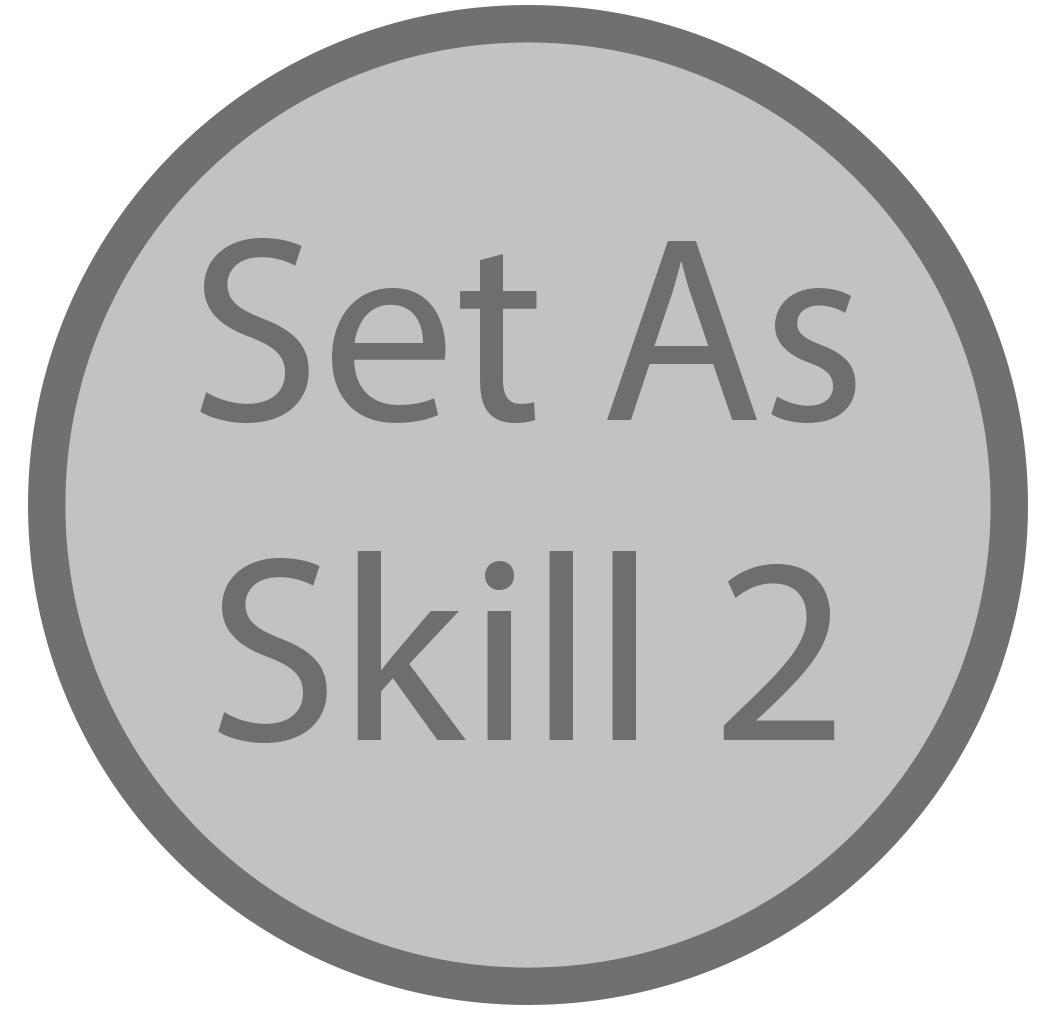
<style>
.page{position:relative;width:1063px;height:1028px;background:#c2c2c2}
.page>*{position:absolute;margin:0}
.t1{font:266.2px "MyriadPro-Regular";color:#6e6e6e}
</style>
<div class="page">
<p class="t1" style="left:200px;top:237px;width:656px;height:507px;text-align:center">Set As<br>Skill 2</p>
</div>
